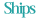
<style>
.page{position:relative;width:36px;height:18px;background:#ffffff}
.page>*{position:absolute;margin:0}
.t1{font:16px "HeiseiMinStd-W7";letter-spacing:-0.09em;color:#25a2a2}
</style>
<div class="page">
<p class="t1" style="left:4px;top:1px;width:32px;height:17px">Ships</p>
</div>
